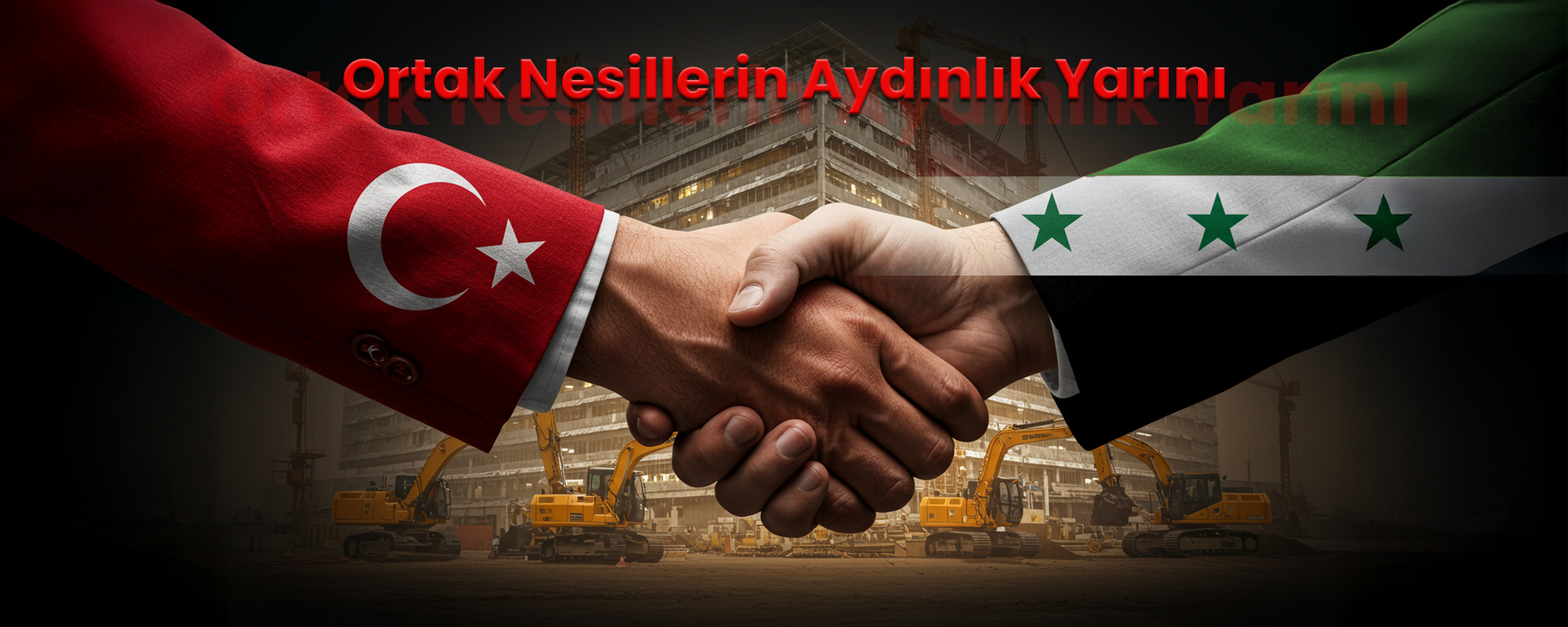
<style>
.page{position:relative;width:1568px;height:627px}
.page>*{position:absolute;margin:0}
.t1{font:56.3px "Poppins-Bold";color:#ea0808}
</style>
<div class="page">
<p class="t1" style="left:343px;top:53px;width:882px;height:61px">Ortak Nesillerin Aydınlık Yarını</p>
</div>
